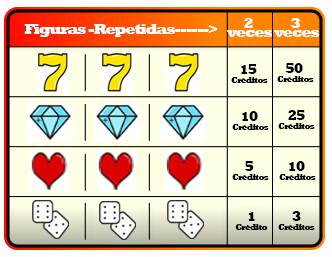
<style>
.page{position:relative;width:332px;height:257px;background:#ffffe6}
.page>*{position:absolute;margin:0}
.t1{font:15px "Rockwell-ExtraBold";letter-spacing:-0.075em;color:#ffffff}
.t2{font:15px/9px "Rockwell-ExtraBold";letter-spacing:-0.075em;color:#ffffff}
.t3{font:8px/9px "Rockwell-ExtraBold";letter-spacing:-0.075em;color:#000000}
.t4{font:14px/9px "Rockwell-ExtraBold";letter-spacing:-0.075em;color:#000000}
</style>
<div class="page">
<p class="t1" style="left:24px;top:24px;width:194px;height:13px">Figuras -Repetidas------&gt;</p>
<p class="t2" style="left:227px;top:18px;width:46px;height:19px;text-align:center">2 <br>veces</p>
<p class="t2" style="left:274px;top:18px;width:46px;height:19px;text-align:center">3 <br>veces</p>
<p class="t3" style="left:231px;top:64px;width:37px;height:19px;text-align:center"><span class="t4">15 <br></span>Créditos</p>
<p class="t3" style="left:277px;top:63px;width:37px;height:19px;text-align:center"><span class="t4">50 <br></span>Créditos</p>
<p class="t3" style="left:232px;top:111px;width:37px;height:19px;text-align:center"><span class="t4">10 <br></span>Créditos</p>
<p class="t3" style="left:278px;top:110px;width:37px;height:19px;text-align:center"><span class="t4">25<br></span>Créditos</p>
<p class="t3" style="left:232px;top:161px;width:37px;height:19px;text-align:center"><span class="t4">5 <br></span>Créditos</p>
<p class="t3" style="left:279px;top:161px;width:37px;height:19px;text-align:center"><span class="t4">10 <br></span>Créditos</p>
<p class="t3" style="left:235px;top:212px;width:33px;height:18px;text-align:center"><span class="t4">1<br></span>Crédito</p>
<p class="t3" style="left:278px;top:211px;width:37px;height:19px;text-align:center"><span class="t4">3<br></span>Créditos</p>
</div>
